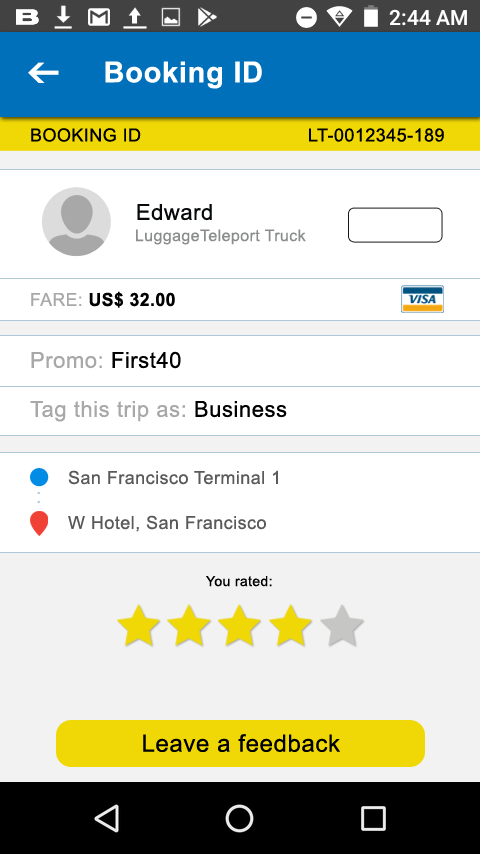
<style>
.page{position:relative;width:480px;height:854px;background:#ffffff}
.page>*{position:absolute;margin:0}
.t1{font:29px "Arial-BoldMT";letter-spacing:0.025em;color:#ffffff}
.t2{font:18px "ArialMT";letter-spacing:0.025em;color:#000000}
.t3{font:22px "ArialMT";letter-spacing:0.025em;color:#060a0a}
.t4{font:16px "ArialMT";letter-spacing:0.025em;color:#8b8d8d}
.t5{font:18px "Arial-BoldMT";letter-spacing:0.025em;color:#000000}
.t6{font:18px "ArialMT";letter-spacing:0.025em;color:#a9a8a8}
.t7{font:22px "ArialMT";letter-spacing:0.025em;color:#000000}
.t8{font:22px "ArialMT";letter-spacing:0.025em;color:#a9a8a8}
.t9{font:18px/45px "ArialMT";letter-spacing:0.025em;color:#5a5a5a}
.t10{font:14px "ArialMT";letter-spacing:0.025em;color:#000000}
.t11{font:24px "ArialMT";letter-spacing:0.025em;color:#000000}
</style>
<div class="page">
<p class="t1" style="left:105px;top:61px;width:157px;height:28px">Booking ID</p>
<p class="t2" style="left:31px;top:128px;width:110px;height:14px">BOOKING ID</p>
<p class="t2" style="left:309px;top:128px;width:135px;height:14px">LT-0012345-189</p>
<p class="t3" style="left:137px;top:204px;width:75px;height:17px">Edward</p>
<p class="t4" style="left:136px;top:229px;width:170px;height:16px">LuggageTeleport Truck</p>
<p class="t5" style="left:31px;top:291px;width:144px;height:17px"><span class="t6">FARE: </span>US$ 32.00</p>
<p class="t7" style="left:31px;top:351px;width:150px;height:18px"><span class="t8">Promo:</span> First40</p>
<p class="t8" style="left:30px;top:401px;width:257px;height:21px">Tag this trip as:<span class="t7"> Business</span></p>
<p class="t9" style="left:68px;top:470px;width:210px;height:62px">San Francisco Terminal 1<br>W Hotel, San Francisco</p>
<p class="t10" style="left:206px;top:576px;width:66px;height:11px">You rated:</p>
<p class="t11" style="left:143px;top:734px;width:197px;height:18px">Leave a feedback</p>
</div>
